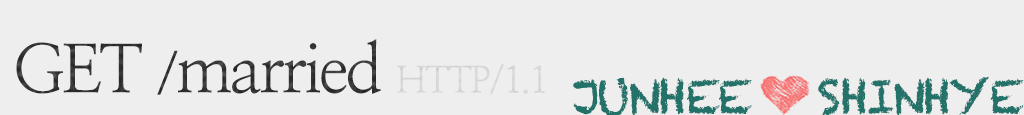
<style>
.page{position:relative;width:1024px;height:115px;background:#eeeeee}
.page>*{position:absolute;margin:0}
.t1{font:36.7px "NanumMyeongjo";letter-spacing:-0.05em;color:#d5d5d5}
.t2{font:66.7px "NanumMyeongjo";letter-spacing:-0.05em;color:#2e2d2d}
.t3{font:53.3px "NanumMyeongjo";letter-spacing:-0.05em;color:#2e2d2d}
.t4{font:46.7px "Chalkduster";letter-spacing:-0.05em;color:#22726a}
</style>
<div class="page">
<p class="t1" style="left:16px;top:39px;width:529px;height:56px"><span class="t2">GET </span><span class="t3">/</span><span class="t2">married </span>HTTP/1.1</p>
<p class="t4" style="left:573px;top:76px;width:451px;height:41px">JUNHEE    SHINHYE</p>
</div>
